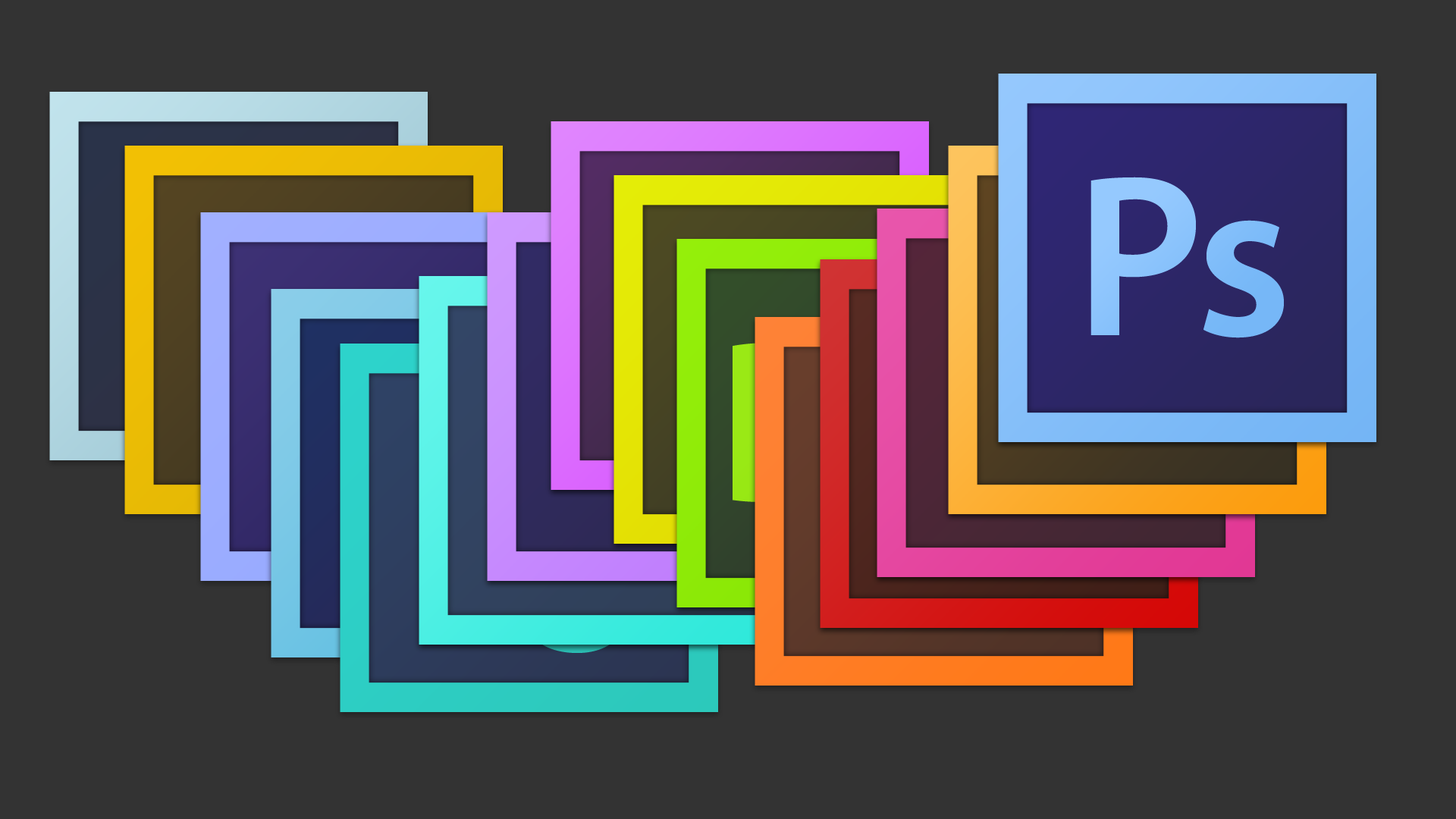
<style>
.page{position:relative;width:1456px;height:819px;background:#333333}
.page>*{position:absolute;margin:0}
.t1{font:231.7px "MyriadPro-Semibold";letter-spacing:-0.04em;color:#8bc3fc}
</style>
<div class="page">
<p class="t1" style="left:1090px;top:177px;width:194px;height:161px">Ps</p>
</div>
